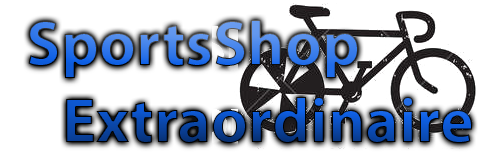
<style>
.page{position:relative;width:500px;height:163px;background:#ffffff}
.page>*{position:absolute;margin:0}
.t1{font:64px "MyriadPro-Bold"}
</style>
<div class="page">
<p class="t1" style="left:28px;top:20px;width:444px;height:123px">SportsShop <br> Extraordinaire</p>
</div>
